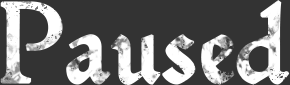
<style>
.page{position:relative;width:290px;height:85px;background:#333333}
.page>*{position:absolute;margin:0}
.t1{font:112.5px "Hamlet-Tertia18";color:#ffffff;font-weight:bold}
</style>
<div class="page">
<p class="t1" style="left:0px;top:0px;width:290px;height:85px">Paused</p>
</div>
